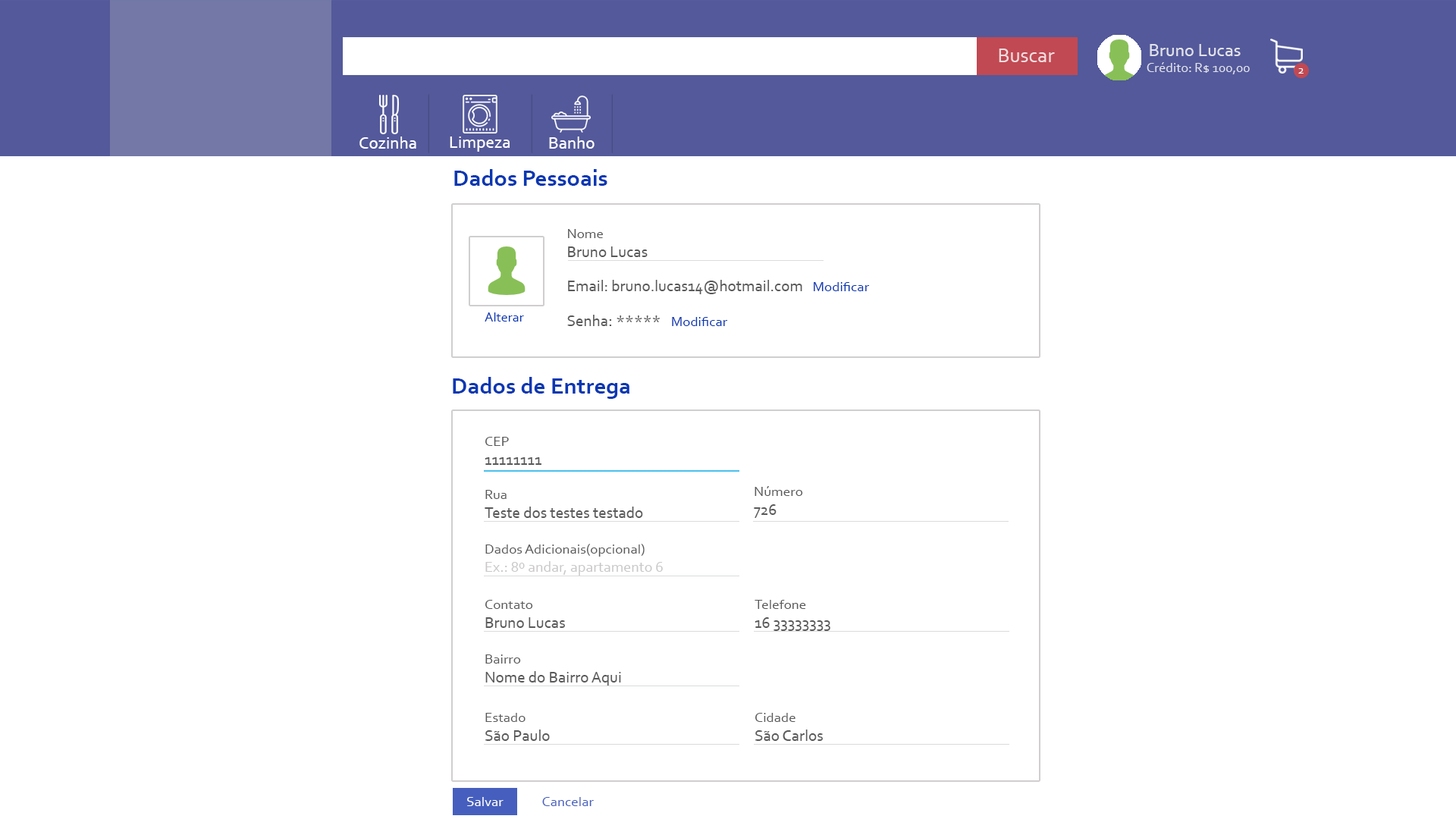
<style>
.page{position:relative;width:1456px;height:819px;background:#ffffff}
.page>*{position:absolute;margin:0}
.t1{font:20.5px "Corbel";color:#f2dedf}
.t2{font:18.2px "Corbel";color:#e1e2eb}
.t3{font:13.6px "Corbel";color:#e1e2eb}
.t4{font:12.1px "Corbel";color:#ffffff}
.t5{font:17.4px "Corbel";color:#ffffff}
.t6{font:23.5px "Corbel-Bold";color:#0637b3}
.t7{font:15.9px "Corbel";color:#5a5a5a}
.t8{font:14.4px "Corbel";color:#5a5a5a}
.t9{font:14.4px "Corbel";color:#0637b3}
.t10{font:13.6px "Corbel";color:#0637b3}
.t11{font:16.7px "Corbel";color:#5a5a5a}
.t12{font:15.2px "Corbel";color:#cac8c8}
.t13{font:14.4px "Corbel";color:#ffffff}
.t14{font:14.4px "Corbel";color:#465fbe}
</style>
<div class="page">
<p class="t1" style="left:999px;top:49px;width:56px;height:13px">Buscar</p>
<p class="t2" style="left:1150px;top:44px;width:91px;height:12px">Bruno Lucas</p>
<p class="t3" style="left:1147px;top:62px;width:103px;height:12px">Crédito: R$ 100,00</p>
<p class="t4" style="left:1298px;top:68px;width:6px;height:6px">2</p>
<p class="t5" style="left:359px;top:136px;width:57px;height:13px">Cozinha</p>
<p class="t5" style="left:450px;top:136px;width:60px;height:16px">Limpeza</p>
<p class="t5" style="left:549px;top:136px;width:46px;height:13px">Banho</p>
<p class="t6" style="left:454px;top:169px;width:153px;height:17px">Dados Pessoais</p>
<p class="t7" style="left:568px;top:229px;width:80px;height:28px"><span class="t8">Nome <br></span>Bruno Lucas</p>
<p class="t7" style="left:568px;top:280px;width:302px;height:14px">Email: bruno.lucas14@hotmail.com   <span class="t9">Modificar</span></p>
<p class="t10" style="left:485px;top:312px;width:39px;height:10px">Alterar</p>
<p class="t9" style="left:567px;top:315px;width:161px;height:11px"><span class="t7">Senha</span><span class="t11">: *****   </span>Modificar</p>
<p class="t6" style="left:453px;top:377px;width:176px;height:22px">Dados de Entrega</p>
<p class="t7" style="left:485px;top:437px;width:56px;height:28px"><span class="t8">CEP<br></span>11111111</p>
<p class="t7" style="left:485px;top:490px;width:158px;height:28px"><span class="t8">Rua <br></span>Teste dos testes testado</p>
<p class="t8" style="left:754px;top:486px;width:49px;height:32px">Número<br><span class="t7">726</span></p>
<p class="t12" style="left:485px;top:544px;width:178px;height:32px"><span class="t8">Dados Adicionais(opcional)<br></span>Ex.: 8º andar, apartamento 6</p>
<p class="t7" style="left:485px;top:600px;width:80px;height:28px"><span class="t8">Contato<br></span>Bruno Lucas</p>
<p class="t7" style="left:755px;top:600px;width:75px;height:31px"><span class="t8">Telefone<br></span>16 33333333</p>
<p class="t7" style="left:485px;top:654px;width:136px;height:32px"><span class="t8">Bairro<br></span>Nome do Bairro Aqui</p>
<p class="t7" style="left:485px;top:713px;width:65px;height:28px"><span class="t8">Estado<br></span>São Paulo</p>
<p class="t7" style="left:755px;top:713px;width:68px;height:28px"><span class="t8">Cidade<br></span>São Carlos</p>
<p class="t13" style="left:467px;top:797px;width:37px;height:9px">Salvar</p>
<p class="t14" style="left:542px;top:797px;width:52px;height:9px">Cancelar</p>
</div>
